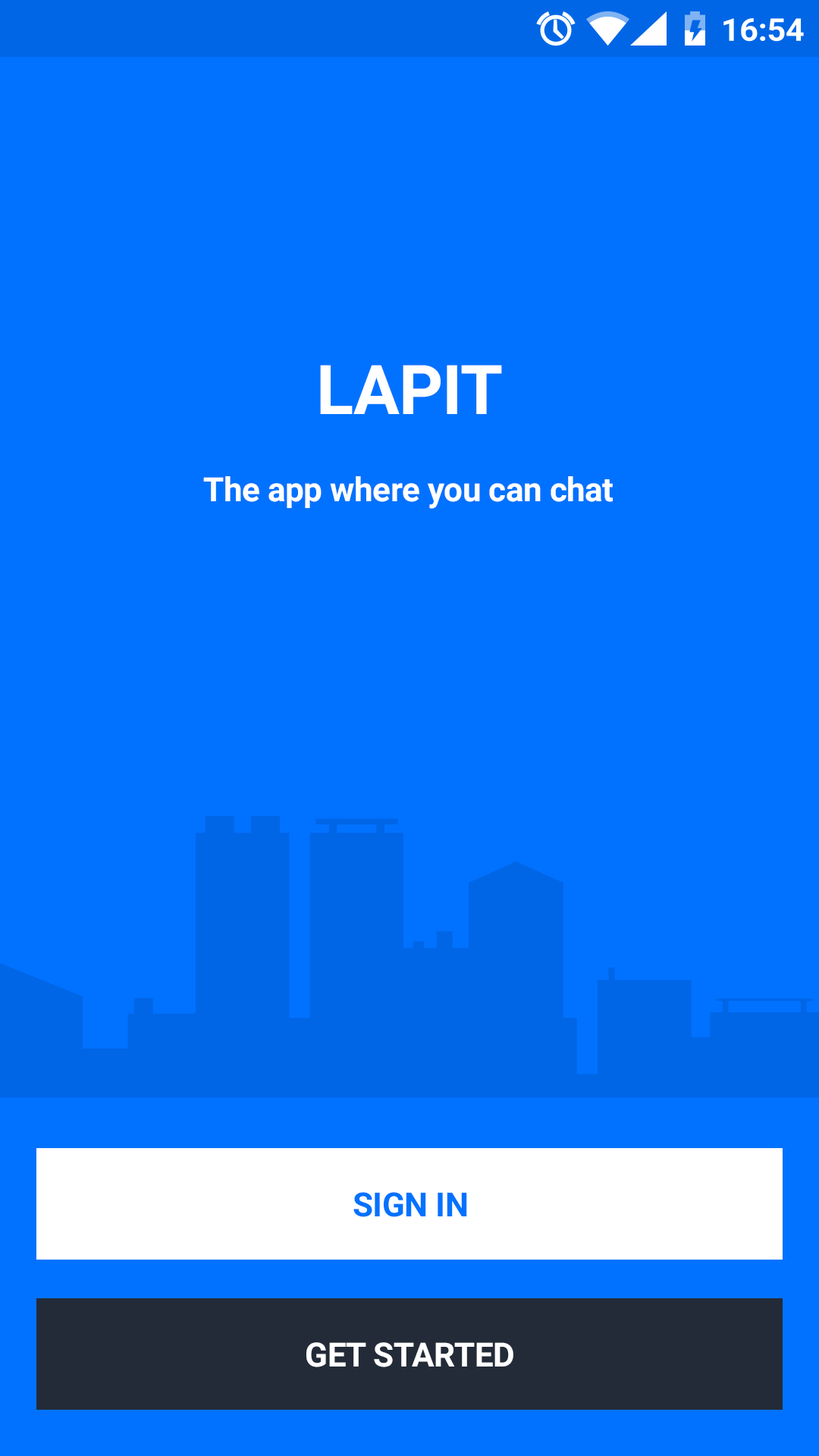
<style>
.page{position:relative;width:819px;height:1456px;background:#0172ff}
.page>*{position:absolute;margin:0}
.t1{font:68.6px "Roboto-Bold";letter-spacing:-0.01em;color:#ffffff}
.t2{font:33.4px "Roboto-Bold";letter-spacing:-0.01em;color:#ffffff}
.t3{font:33.4px "Roboto-Bold";letter-spacing:-0.01em;color:#0172ff}
</style>
<div class="page">
<p class="t1" style="left:320px;top:365px;width:182px;height:49px">LAPIT</p>
<p class="t2" style="left:203px;top:476px;width:410px;height:33px">The app where you can chat</p>
<p class="t3" style="left:353px;top:1192px;width:114px;height:25px">SIGN IN</p>
<p class="t2" style="left:306px;top:1342px;width:207px;height:25px">GET STARTED</p>
</div>
